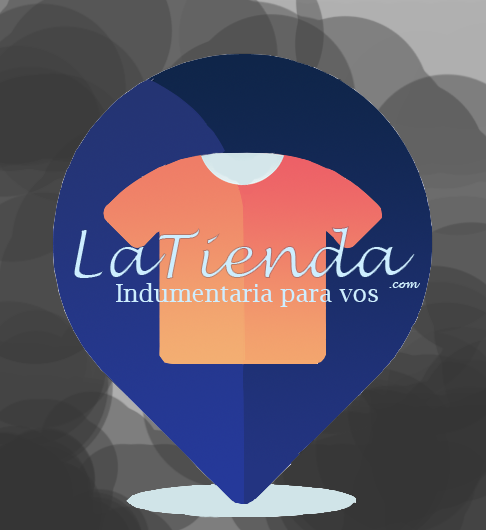
<style>
.page{position:relative;width:486px;height:530px}
.page>*{position:absolute;margin:0}
.t1{font:61.1px "LucidaHandwriting-Italic"}
.t2{font:24px "LucidaBright";color:#cdeeff}
.t3{font:11px "LucidaHandwriting-Italic";color:#cdeeff}
</style>
<div class="page">
<p class="t1" style="left:73px;top:226px;width:343px;height:53px">LaTienda</p>
<p class="t2" style="left:116px;top:283px;width:262px;height:24px">Indumentaria para vos</p>
<p class="t3" style="left:389px;top:282px;width:31px;height:6px">.com</p>
</div>
